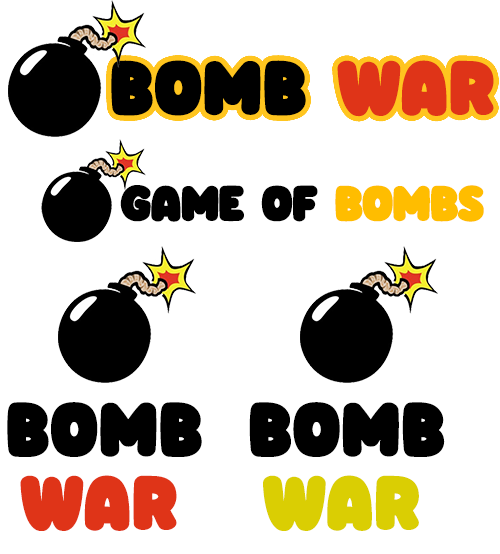
<style>
.page{position:relative;width:500px;height:554px;background:#ffffff}
.page>*{position:absolute;margin:0}
.t1{font:75.3px "Knicknack-Bold";color:#000000;text-transform:uppercase;font-weight:bold;scale:1.04 1}
.t2{font:75.3px "Knicknack-Bold";color:#df3418;text-transform:uppercase;font-weight:bold;scale:1.04 1}
.t3{font:48.9px "Knicknack-Bold";letter-spacing:-0.025em;color:#000000;text-transform:uppercase;font-weight:bold;scale:1.04 1}
.t4{font:48.9px "Knicknack-Bold";letter-spacing:-0.025em;color:#ffbd00;text-transform:uppercase;font-weight:bold;scale:1.04 1}
.t5{font:75.3px "Knicknack-Bold";color:#dace03;text-transform:uppercase;font-weight:bold;scale:1.04 1}
</style>
<div class="page">
<p class="t1" style="left:111px;top:60px;width:383px;height:57px">Bomb <span class="t2">war</span></p>
<p class="t3" style="left:120px;top:185px;width:364px;height:37px">GAME OF <span class="t4">BOMBS</span></p>
<p class="t1" style="left:7px;top:402px;width:195px;height:55px">Bomb</p>
<p class="t1" style="left:249px;top:402px;width:196px;height:55px">Bomb</p>
<p class="t2" style="left:20px;top:475px;width:157px;height:56px"><span class="t1"><br></span>war</p>
<p class="t5" style="left:263px;top:475px;width:156px;height:56px">war</p>
</div>
